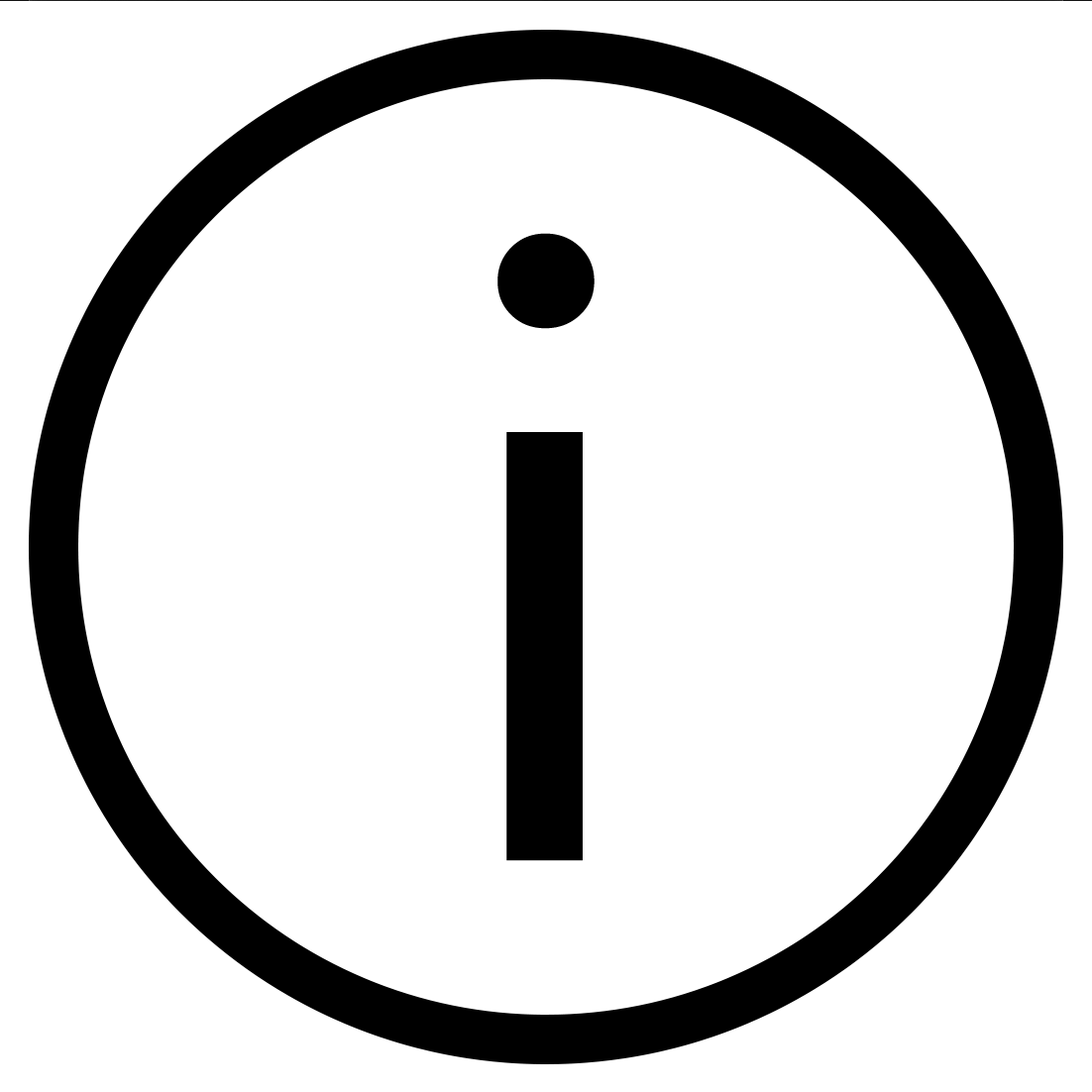
<style>
.page{position:relative;width:1092px;height:1092px;background:#ffffff}
.page>*{position:absolute;margin:0}
.t1{font:792.7px "MicrosoftYaHei";color:#000000}
</style>
<div class="page">
<p class="t1" style="left:497px;top:232px;width:98px;height:628px">i</p>
</div>
